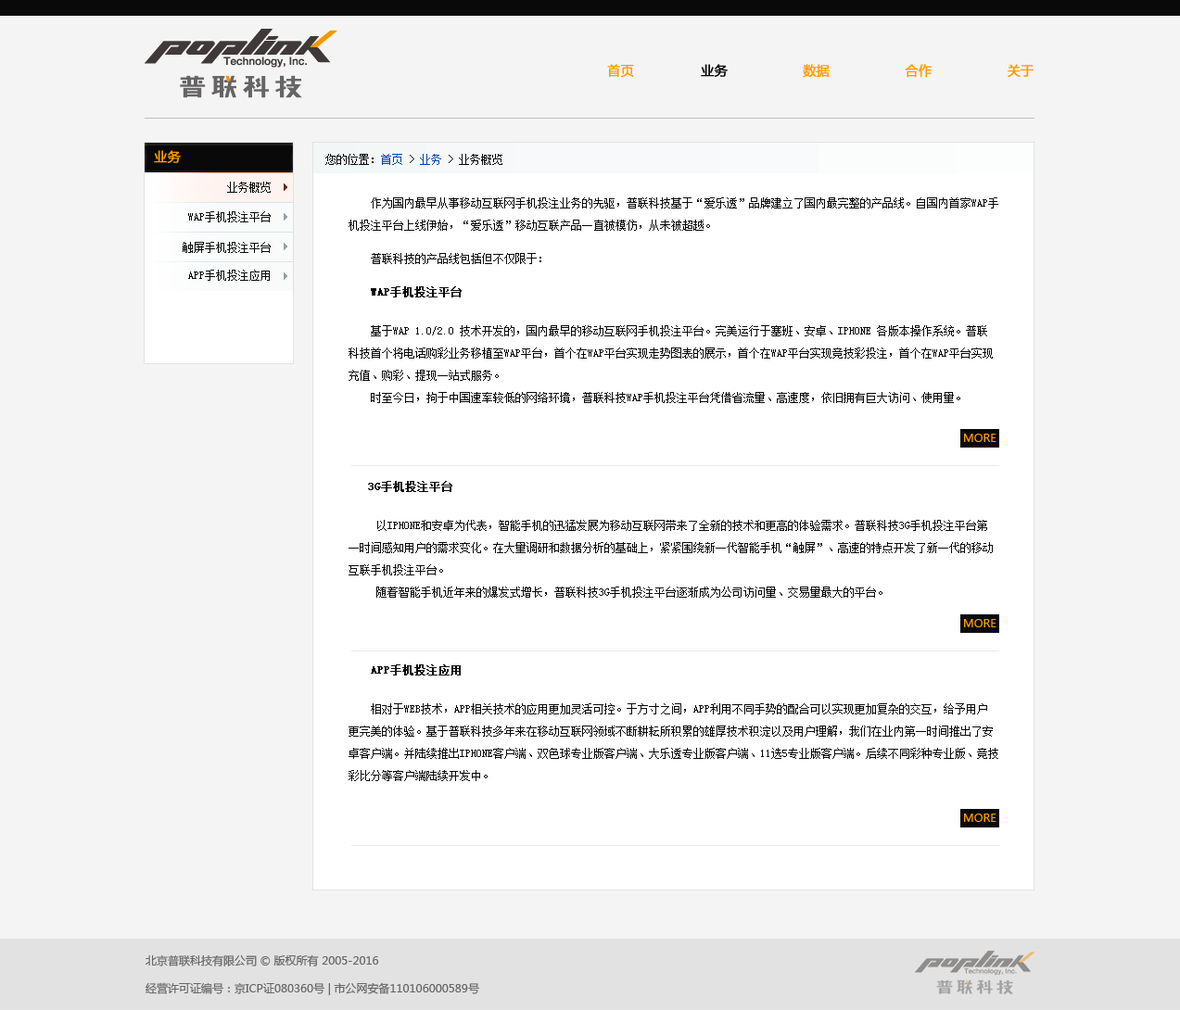
<style>
.page{position:relative;width:1180px;height:1010px;background:#f4f4f4}
.page>*{position:absolute;margin:0}
.t1{font:13px "MicrosoftYaHei";color:#fe9b00;text-transform:uppercase;font-weight:bold}
.t2{font:13px "MicrosoftYaHei";color:#090909;text-transform:uppercase;font-weight:bold}
.t3{font:13px "MicrosoftYaHei";color:#fe9b00;font-weight:bold}
.t4{font:11.1px "SimSun";color:#090909;text-transform:uppercase}
.t5{font:11.1px "SimSun";color:#0146af;text-transform:uppercase}
.t6{font:11.1px/22.2px "SimSun";color:#090909;text-transform:uppercase}
.t7{font:11.1px/16.7px "SimSun";color:#090909;text-transform:uppercase}
.t8{font:11.1px/16.7px "SimSun";color:#090909;text-transform:uppercase;font-weight:bold}
.t9{font:11.1px/22.2px "SimSun";color:#090909;text-transform:uppercase;font-weight:bold}
.t10{font:11.1px "MicrosoftYaHei";color:#fe9b00;text-transform:uppercase}
.t11{font:11.1px/27.8px "MicrosoftYaHei";color:#666666}
</style>
<div class="page">
<p class="t1" style="left:607px;top:64px;width:427px;height:14px">首页 <span class="t2">               业务 </span>                 数据                  合作                  关于</p>
<p class="t3" style="left:154px;top:150px;width:27px;height:13px">业务</p>
<p class="t4" style="left:325px;top:154px;width:177px;height:11px">您的位置：<span class="t5">首页 </span>&gt; <span class="t5">业务</span> &gt; 业务概览</p>
<p class="t4" style="left:227px;top:182px;width:44px;height:11px">业务概览</p>
<p class="t6" style="left:349px;top:197px;width:649px;height:584px">作为国内最早从事移动互联网手机投注业务的先驱，普联科技基于“爱乐透”品牌建立了国内最完整的产品线。自国内首家WAP手<br>机投注平台上线伊始，“爱乐透”移动互联产品一直被模仿，从未被超越。<br><span class="t7"><br>    普联科技的产品线包括但不仅限于：<br><br>    </span><span class="t8">WAP手机投注平台<br><br>    </span>基于WAP 1.0/2.0 技术开发的，国内最早的移动互联网手机投注平台。完美运行于塞班、安卓、iphone 各版本操作系统。普联<br>科技首个将电话购彩业务移植至WAP平台，首个在WAP平台实现走势图表的展示，首个在WAP平台实现竞技彩投注，首个在WAP平台实现<br>充值、购彩、提现一站式服务。<br>    时至今日，拘于中国速率较低的网络环境，普联科技WAP手机投注平台凭借省流量、高速度，依旧拥有巨大访问、使用量。<br><br><br><br><br><span class="t8">   3G手机投注平台<br><br></span>     以iphone和安卓为代表，智能手机的迅猛发展为移动互联网带来了全新的技术和更高的体验需求。普联科技3G手机投注平台第<br>一时间感知用户的需求变化。在大量调研和数据分析的基础上，紧紧围绕新一代智能手机“触屏”、高速的特点开发了新一代的移动<br>互联手机投注平台。<br>     随着智能手机近年来的爆发式增长，普联科技3G手机投注平台逐渐成为公司访问量、交易量最大的平台。<br><br><br><br>    <span class="t9">APP手机投注应用<br><br></span>    相对于WEB技术，APP相关技术的应用更加灵活可控。于方寸之间，APP利用不同手势的配合可以实现更加复杂的交互，给予用户<br>更完美的体验。基于普联科技多年来在移动互联网领域不断耕耘所积累的雄厚技术积淀以及用户理解，我们在业内第一时间推出了安<br>卓客户端。并陆续推出iphone客户端、双色球专业版客户端、大乐透专业版客户端、11选5专业版客户端。后续不同彩种专业版、竞技<br>彩比分等客户端陆续开发中。</p>
<p class="t4" style="left:188px;top:211px;width:83px;height:11px">WAP手机投注平台</p>
<p class="t4" style="left:183px;top:242px;width:88px;height:11px">触屏手机投注平台</p>
<p class="t4" style="left:188px;top:270px;width:82px;height:11px">App手机投注应用</p>
<p class="t10" style="left:964px;top:434px;width:33px;height:8px">more</p>
<p class="t10" style="left:964px;top:619px;width:33px;height:9px">more</p>
<p class="t10" style="left:964px;top:814px;width:33px;height:8px">more</p>
<p class="t11" style="left:146px;top:955px;width:334px;height:41px">北京普联科技有限公司 © 版权所有 2005-2016<br>经营许可证编号：京ICP证080360号 | 市公网安备110106000589号</p>
</div>
